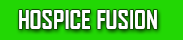
<style>
.page{position:relative;width:183px;height:40px;background:#22d704}
.page>*{position:absolute;margin:0}
.t1{font:25px "AgencyFB-Bold";color:#ffffff}
</style>
<div class="page">
<p class="t1" style="left:19px;top:10px;width:138px;height:19px">HOSPICE FUSION</p>
</div>
